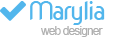
<style>
.page{position:relative;width:115px;height:37px;background:#ffffff}
.page>*{position:absolute;margin:0}
.t1{font:24.7px "NovaRound";letter-spacing:-0.075em;color:#52b6ec}
.t2{font:12px "ArialMT";letter-spacing:-0.075em;color:#b0b0b0}
</style>
<div class="page">
<p class="t1" style="left:30px;top:1px;width:75px;height:24px">Marylia</p>
<p class="t2" style="left:41px;top:26px;width:62px;height:11px">web designer</p>
</div>
